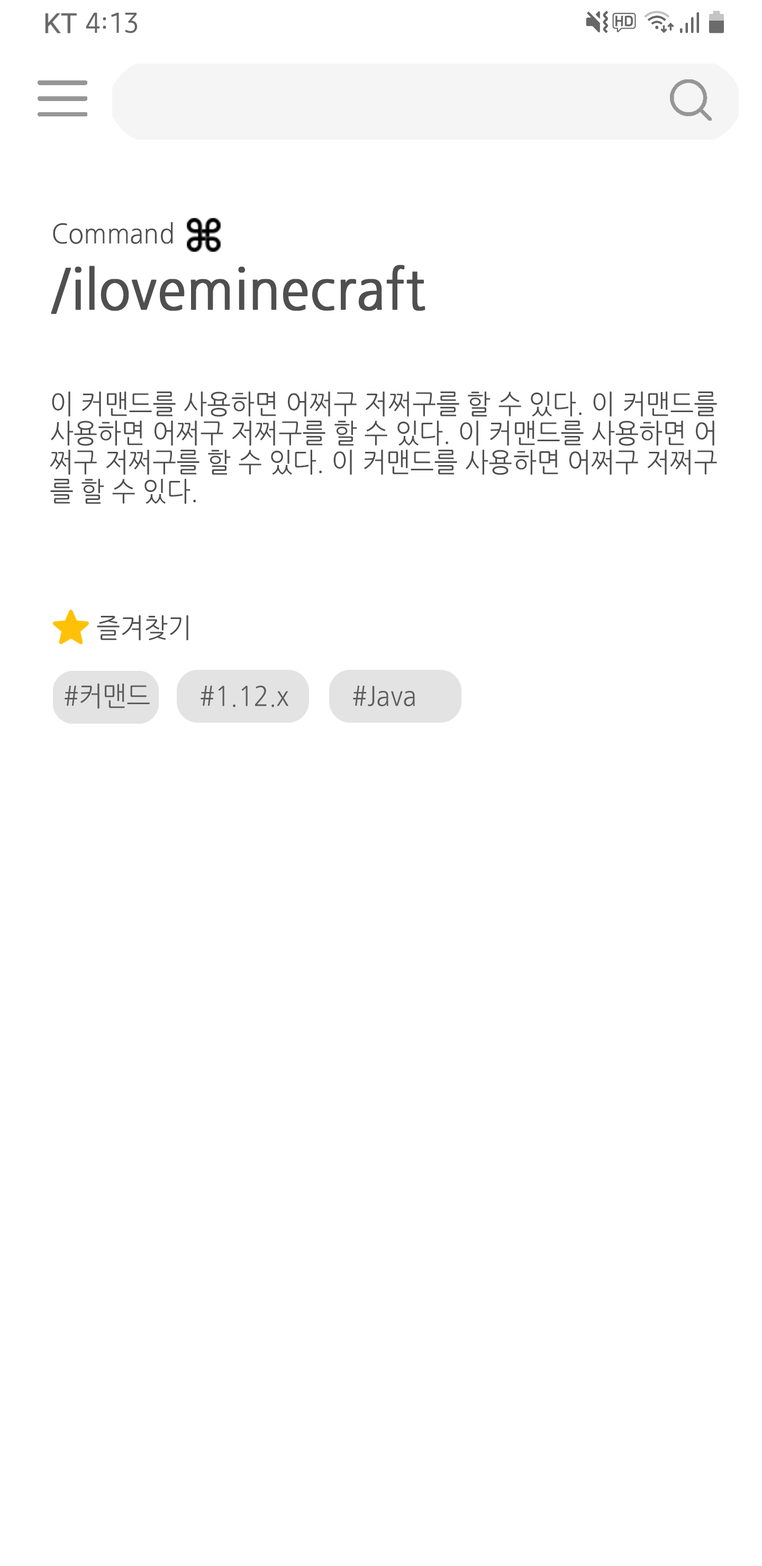
<style>
.page{position:relative;width:762px;height:1566px;background:#ffffff}
.page>*{position:absolute;margin:0}
.t1{font:27px "NanumGothic";color:#4f4f4f;scale:0.94 1}
.t2{font:54.5px "NanumGothic";color:#4f4f4f;font-weight:bold;scale:0.94 1}
.t3{font:27px/29.1px "NanumGothic";color:#4f4f4f;scale:0.94 1}
.t4{font:27px "NanumGothic";color:#5d5d5d;scale:0.94 1}
</style>
<div class="page">
<p class="t1" style="left:53px;top:222px;width:120px;height:22px">Command</p>
<p class="t2" style="left:51px;top:264px;width:374px;height:50px">/iloveminecraft</p>
<p class="t3" style="left:50px;top:391px;width:667px;height:113px">이 커맨드를 사용하면 어쩌구 저쩌구를 할 수 있다. 이 커맨드를<br>사용하면 어쩌구 저쩌구를 할 수 있다. 이 커맨드를 사용하면 어<br>쩌구 저쩌구를 할 수 있다. 이 커맨드를 사용하면 어쩌구 저쩌구<br>를 할 수 있다.</p>
<p class="t1" style="left:97px;top:615px;width:91px;height:26px">즐겨찾기</p>
<p class="t4" style="left:65px;top:683px;width:85px;height:26px">#커맨드</p>
<p class="t4" style="left:200px;top:685px;width:88px;height:22px">#1.12.x</p>
<p class="t4" style="left:353px;top:685px;width:62px;height:21px">#Java</p>
</div>
